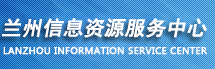
<style>
.page{position:relative;width:215px;height:69px}
.page>*{position:absolute;margin:0}
.t1{font:20px "SimHei";color:#ffffff;font-weight:bold;font-style:italic}
.t2{font:9px "MicrosoftYaHei";letter-spacing:0.025em;color:#ffffff;font-weight:bold}
</style>
<div class="page">
<p class="t1" style="left:1px;top:18px;width:206px;height:20px">兰州信息资源服务中心</p>
<p class="t2" style="left:3px;top:46px;width:204px;height:9px">LANZHOU INFORMATION SERVICE CENTER</p>
</div>
